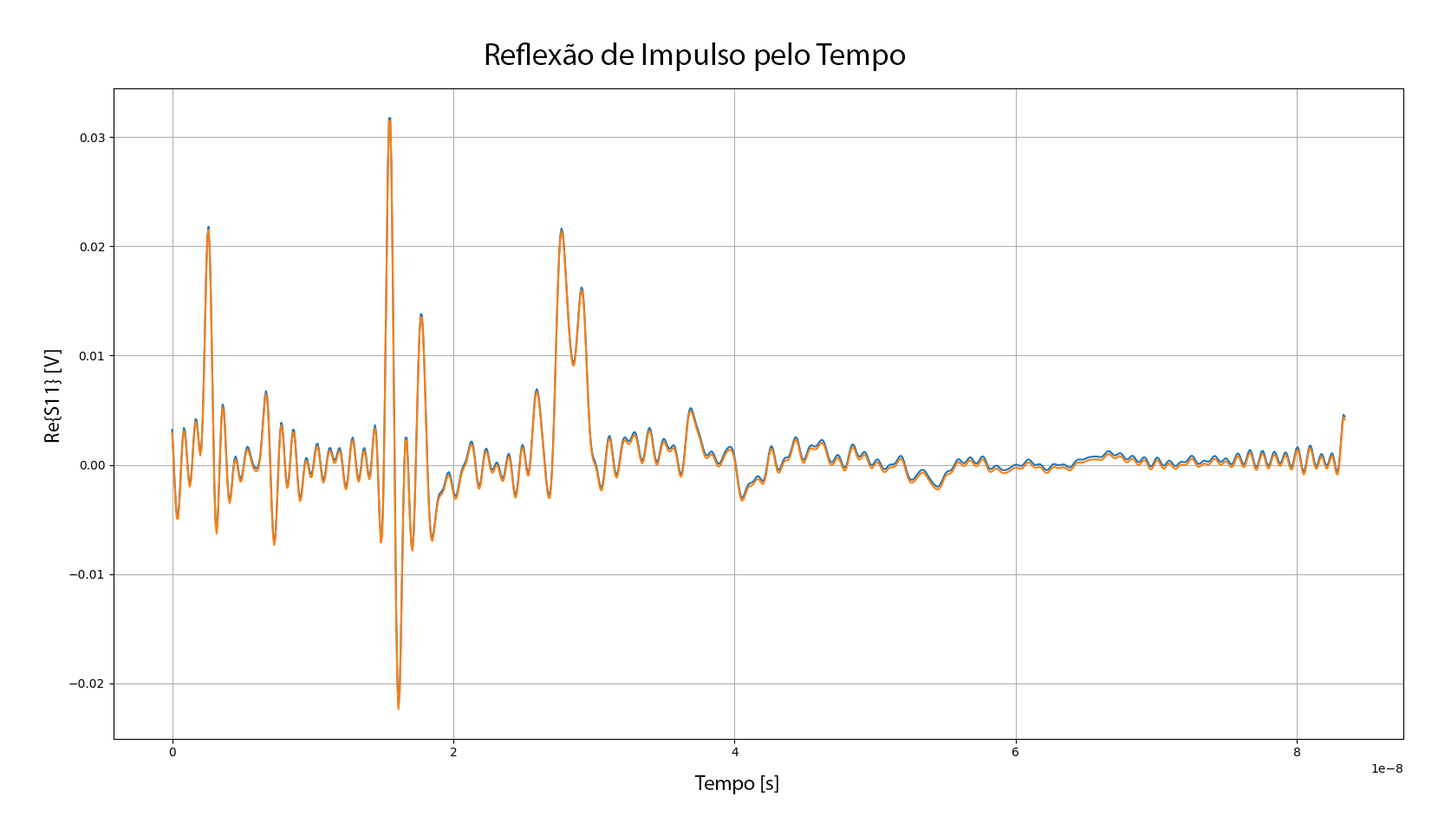
<style>
.page{position:relative;width:1438px;height:829px;background:#ffffff}
.page>*{position:absolute;margin:0}
.t1{font:31.2px "MyriadPro-Regular";color:#000000}
.t2{font:20.8px "MyriadPro-Regular";color:#000000}
</style>
<div class="page">
<p class="t1" style="left:485px;top:42px;width:421px;height:29px">Reflexão de Impulso pelo Tempo</p>
<p class="t2" style="left:44px;top:350px;width:18px;height:93px;rotate:-90deg">Re{S11} [V]</p>
<p class="t2" style="left:694px;top:776px;width:84px;height:19px">Tempo [s]</p>
</div>
